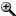
<style>
.page{position:relative;width:16px;height:16px;background:#ffffff}
.page>*{position:absolute;margin:0}
.t1{font:12px "MS-Gothic";color:#000000}
</style>
<div class="page">
<p class="t1" style="left:3px;top:4px;width:6px;height:6px">+</p>
</div>
